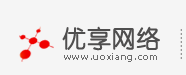
<style>
.page{position:relative;width:186px;height:75px;background:#f5f5f5}
.page>*{position:absolute;margin:0}
.t1{font:24px "YouYuan";color:#4f4e4e;font-weight:bold}
.t2{font:10px "Tahoma";letter-spacing:0.068em;color:#6d6d6d}
</style>
<div class="page">
<p class="t1" style="left:62px;top:26px;width:98px;height:25px">优享网络</p>
<p class="t2" style="left:64px;top:53px;width:93px;height:9px">www.uoxiang.com</p>
</div>
